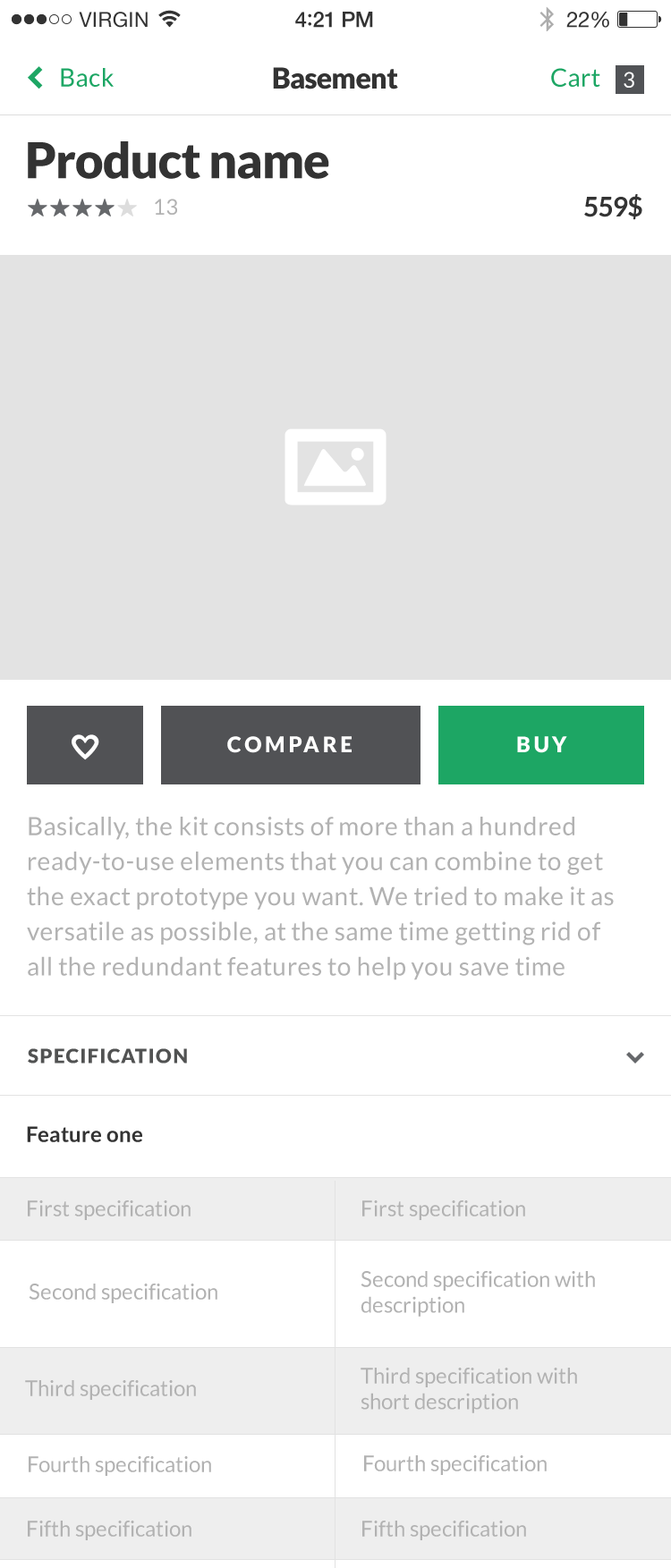
<style>
.page{position:relative;width:671px;height:1568px;background:#ffffff}
.page>*{position:absolute;margin:0}
.t1{font:25px "Lato-Regular";letter-spacing:0.02em;color:#1da664}
.t2{font:28.6px "Lato-Black";letter-spacing:-0.02em;color:#333333}
.t3{font:21.5px "Lato-Regular";letter-spacing:0.02em;color:#ffffff}
.t4{font:49.2px "Lato-Black";letter-spacing:-0.02em;color:#333333}
.t5{font:26.8px "Lato-Bold";letter-spacing:-0.02em;color:#333333}
.t6{font:21.5px "Lato-Regular";letter-spacing:0.02em;color:#b2b2b2}
.t7{font:21.5px "Lato-Black";letter-spacing:0.15em;color:#ffffff}
.t8{font:25px/35.1px "Lato-Regular";letter-spacing:0.02em;color:#b2b2b2}
.t9{font:19.7px "Lato-Black";letter-spacing:0.07em;color:#515252}
.t10{font:21.5px "Lato-Bold";color:#333333}
.t11{font:21.5px "Lato-Regular";color:#b2b2b2}
.t12{font:21.5px/25.8px "Lato-Regular";color:#b2b2b2}
</style>
<div class="page">
<p class="t1" style="left:61px;top:68px;width:53px;height:19px">Back</p>
<p class="t2" style="left:273px;top:67px;width:125px;height:22px">Basement</p>
<p class="t1" style="left:551px;top:68px;width:49px;height:19px">Cart</p>
<p class="t3" style="left:623px;top:72px;width:11px;height:16px">3</p>
<p class="t4" style="left:28px;top:141px;width:301px;height:38px">Product name</p>
<p class="t5" style="left:584px;top:194px;width:58px;height:26px">559$</p>
<p class="t6" style="left:155px;top:199px;width:22px;height:16px">13</p>
<p class="t7" style="left:227px;top:736px;width:125px;height:17px">COMPARE</p>
<p class="t7" style="left:517px;top:736px;width:50px;height:17px">BUY</p>
<p class="t8" style="left:27px;top:817px;width:587px;height:163px">Basically, the kit consists of more than a hundred<br>ready-to-use elements that you can combine to get<br>the exact prototype you want. We tried to make it as<br>versatile as possible, at the same time getting rid of<br>all the redundant features to help you save time</p>
<p class="t9" style="left:28px;top:1048px;width:159px;height:16px">SPECIFICATION</p>
<p class="t10" style="left:27px;top:1126px;width:115px;height:16px">Feature one</p>
<p class="t11" style="left:28px;top:1200px;width:163px;height:20px">First specification</p>
<p class="t11" style="left:362px;top:1200px;width:163px;height:20px">First specification</p>
<p class="t12" style="left:360px;top:1271px;width:235px;height:46px">Second specification with<br>description</p>
<p class="t11" style="left:29px;top:1284px;width:188px;height:19px">Second specification</p>
<p class="t12" style="left:360px;top:1368px;width:217px;height:45px">Third specification with<br>short description</p>
<p class="t11" style="left:25px;top:1380px;width:171px;height:20px">Third specification</p>
<p class="t11" style="left:29px;top:1456px;width:182px;height:20px">Fourth specification</p>
<p class="t11" style="left:364px;top:1455px;width:183px;height:20px">Fourth specification</p>
<p class="t11" style="left:28px;top:1521px;width:163px;height:19px">Fifth specification</p>
<p class="t11" style="left:362px;top:1521px;width:164px;height:19px">Fifth specification</p>
</div>
